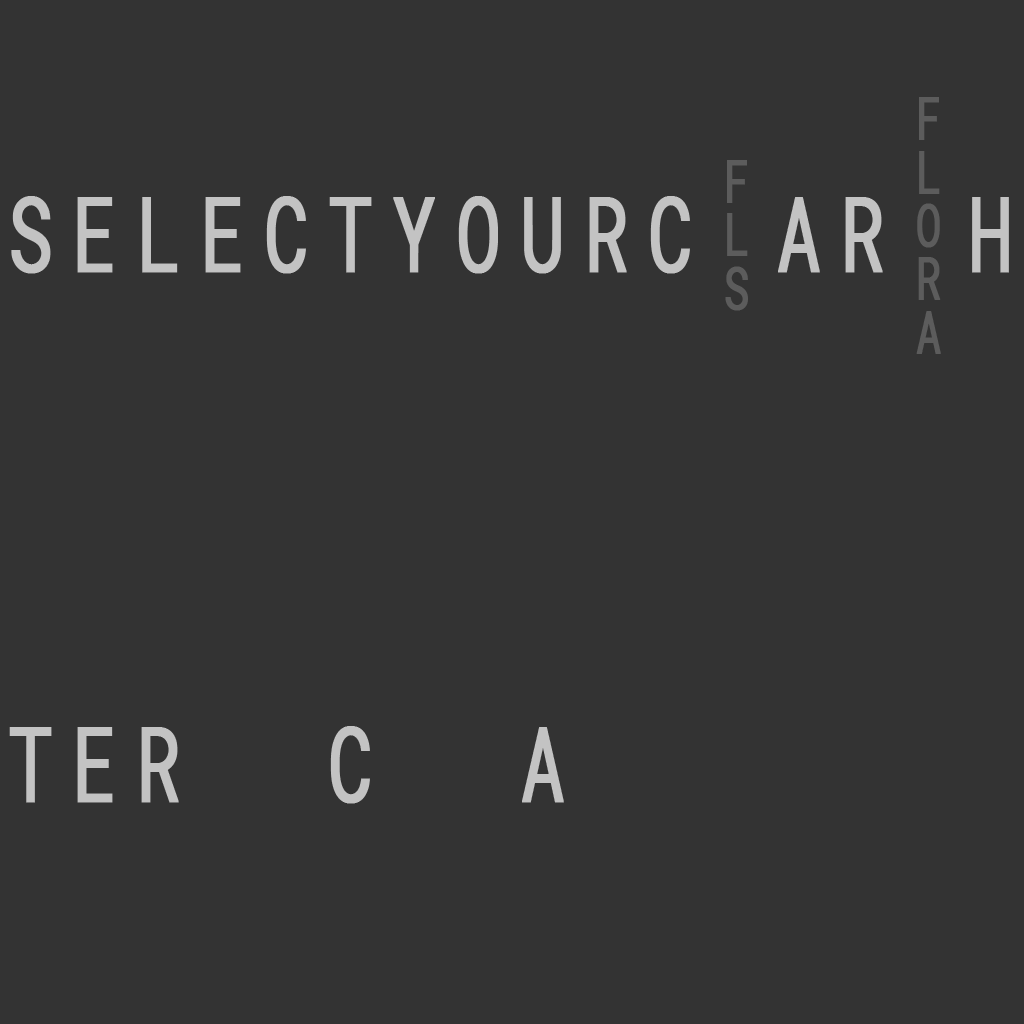
<style>
.page{position:relative;width:1024px;height:1024px;background:#333333}
.page>*{position:absolute;margin:0}
.t1{font:58.9px/53.3px "RobotoMono-Regular";letter-spacing:0.23em;color:#5c5c5c;font-weight:bold;scale:0.72 1}
.t2{font:103px "RobotoMono-Regular";letter-spacing:0.23em;color:#c3c3c3;font-weight:bold;scale:0.72 1}
</style>
<div class="page">
<p class="t1" style="left:916px;top:97px;width:25px;height:257px">F<br>L<br>O<br>R<br>A</p>
<p class="t1" style="left:725px;top:160px;width:23px;height:151px">F<br>L<br>S</p>
<p class="t2" style="left:11px;top:196px;width:998px;height:78px">SELECTYOURC AR H</p>
<p class="t2" style="left:9px;top:726px;width:555px;height:78px">TER  C  A</p>
</div>
